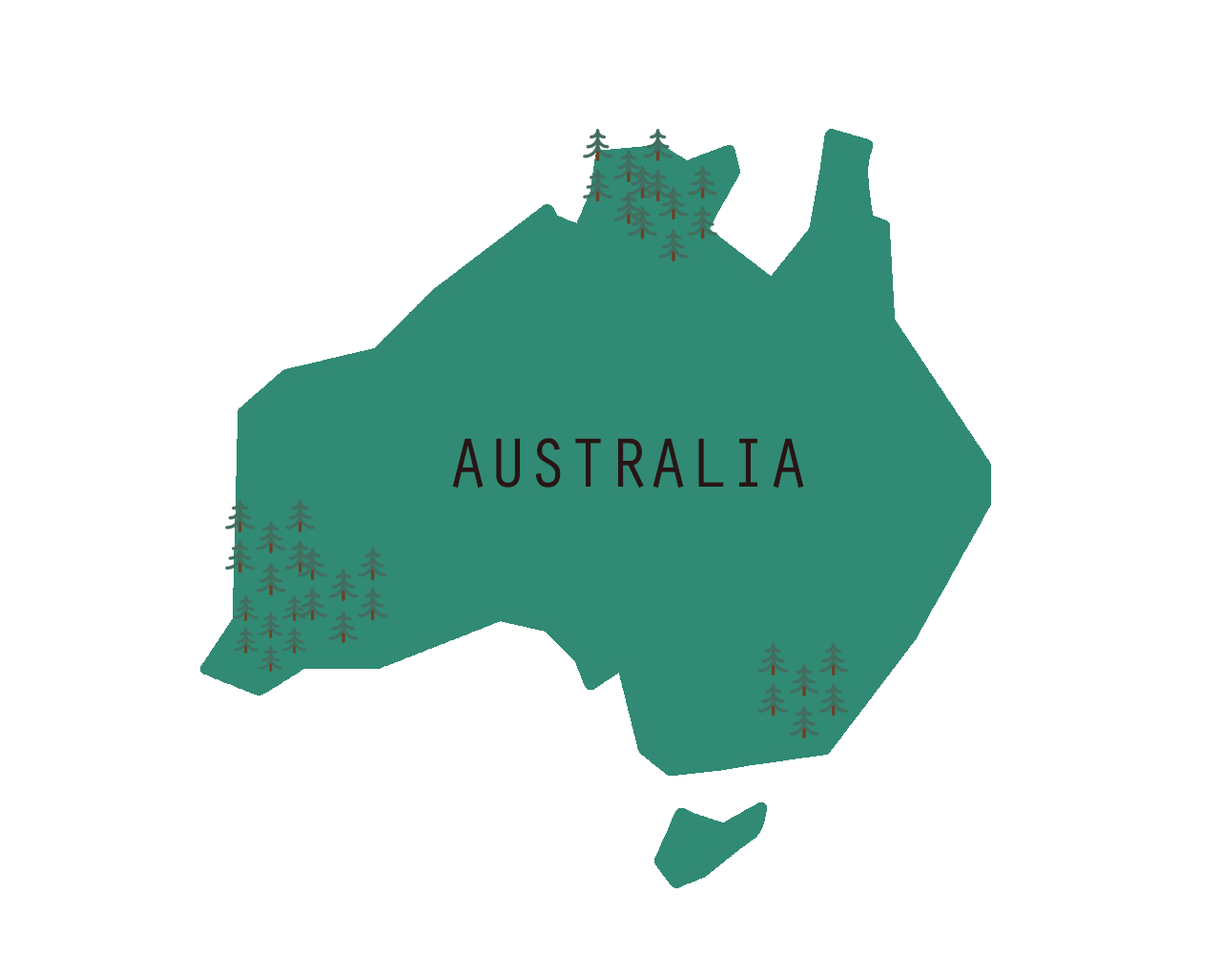
<style>
.page{position:relative;width:1221px;height:977px;background:#ffffff}
.page>*{position:absolute;margin:0}
.t1{font:71.5px "OratorStd";letter-spacing:-0.04em;color:#281515}
</style>
<div class="page">
<p class="t1" style="left:452px;top:438px;width:352px;height:49px">AUSTRALIA</p>
</div>
